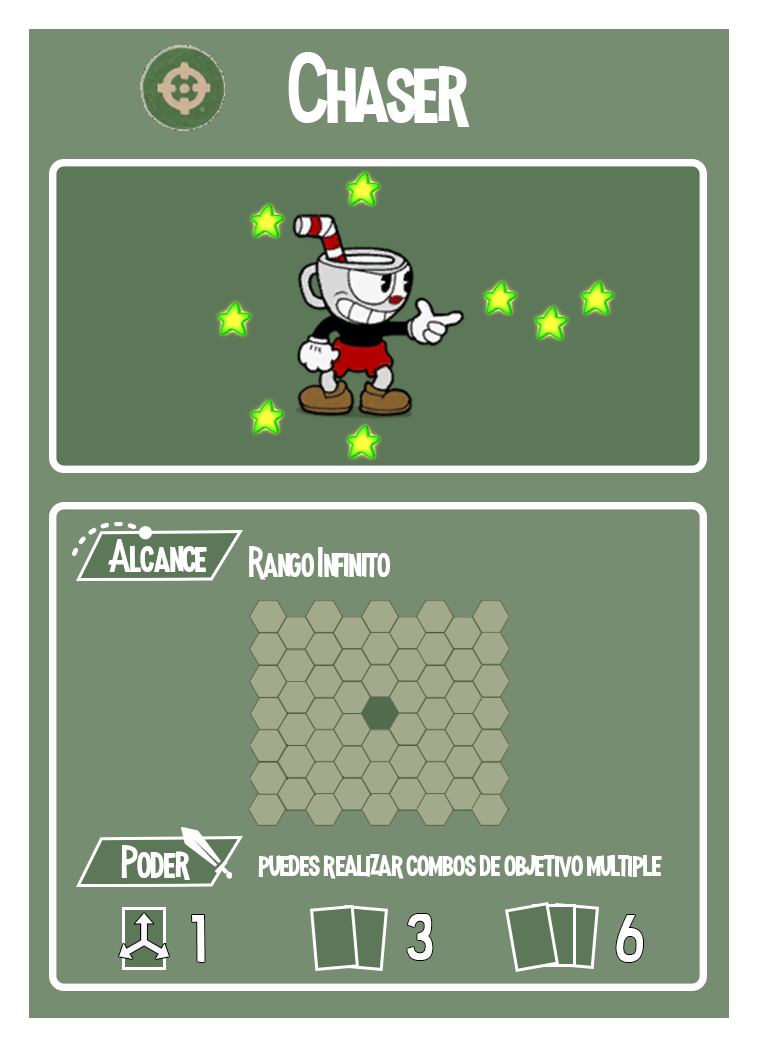
<style>
.page{position:relative;width:758px;height:1047px;background:#768d71}
.page>*{position:absolute;margin:0}
.t1{font:100px "MadnessHyperactive";color:#ffffff}
.t2{font:45.8px "MadnessHyperactive";color:#ffffff}
.t3{font:41.7px "MadnessHyperactive";color:#ffffff}
.t4{font:37.5px "MadnessHyperactive";color:#ffffff}
.t5{font:66.3px "MadnessHyperactive";color:#ffffff}
</style>
<div class="page">
<p class="t1" style="left:288px;top:52px;width:182px;height:75px">Chaser</p>
<p class="t2" style="left:108px;top:539px;width:99px;height:33px">Alcance</p>
<p class="t3" style="left:249px;top:546px;width:141px;height:34px">Rango Infinito</p>
<p class="t2" style="left:121px;top:845px;width:69px;height:35px">Poder</p>
<p class="t4" style="left:258px;top:854px;width:404px;height:25px">puedes realizar combos de objetivo multiple</p>
<p class="t5" style="left:191px;top:915px;width:14px;height:48px">1</p>
<p class="t5" style="left:407px;top:914px;width:26px;height:46px">3</p>
<p class="t5" style="left:616px;top:915px;width:27px;height:47px">6</p>
</div>
